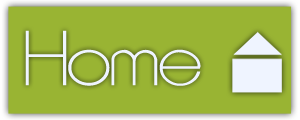
<style>
.page{position:relative;width:300px;height:120px;background:#99b433}
.page>*{position:absolute;margin:0}
.t1{font:90px "Metro-Normal";color:#eff4ff}
</style>
<div class="page">
<p class="t1" style="left:25px;top:30px;width:176px;height:56px">Home</p>
</div>
